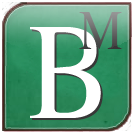
<style>
.page{position:relative;width:132px;height:133px}
.page>*{position:absolute;margin:0}
.t1{font:54.7px "Times-Roman";letter-spacing:0.1em;scale:0.9 1}
.t2{font:136.1px "Times-Roman";letter-spacing:0.1em;color:#ffffff;scale:0.9 1}
</style>
<div class="page">
<p class="t1" style="left:79px;top:12px;width:43px;height:37px">M</p>
<p class="t2" style="left:30px;top:27px;width:71px;height:91px">B</p>
<p class="t2" style="left:32px;top:29px;width:71px;height:91px">B</p>
</div>
